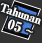
<style>
.page{position:relative;width:42px;height:43px;background:#333333}
.page>*{position:absolute;margin:0}
.t1{font:11px/14px "RyuminPro-ExBold";letter-spacing:-0.08em;color:#ffffff;font-weight:bold}
.t2{font:13px/14px "RyuminPro-ExBold";color:#ffffff;font-weight:bold}
.t3{font:13px/14px "WineArial";color:#ffffff;font-weight:bold}
</style>
<div class="page">
<p class="t1" style="left:0px;top:3px;width:41px;height:30px;text-align:center;rotate:19deg">Tahunan<br><span class="t2">  05 </span><span class="t3">~</span></p>
</div>
